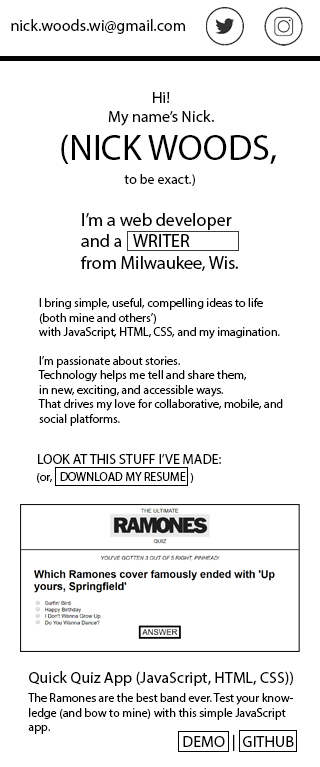
<style>
.page{position:relative;width:320px;height:767px;background:#ffffff}
.page>*{position:absolute;margin:0}
.t1{font:16px "MyriadPro-Regular";color:#000000}
.t2{font:36px "MyriadPro-Regular";color:#000000}
.t3{font:14px "MyriadPro-Regular";color:#000000}
.t4{font:18px "MyriadPro-Regular";color:#000000}
.t5{font:12px "MyriadPro-Regular";color:#000000}
</style>
<div class="page">
<p class="t1" style="left:11px;top:19px;width:174px;height:15px">nick.woods.wi@gmail.com</p>
<p class="t1" style="left:108px;top:92px;width:106px;height:34px;text-align:center">Hi!<br>My name’s Nick.</p>
<p class="t2" style="left:61px;top:134px;width:215px;height:30px">(NICK WOODS,</p>
<p class="t3" style="left:124px;top:174px;width:71px;height:12px">to be exact.)</p>
<p class="t4" style="left:80px;top:213px;width:158px;height:58px">I’m a web developer<br>and a   WRITER<br>from Milwaukee, Wis.</p>
<p class="t5" style="left:38px;top:298px;width:245px;height:128px">I bring simple, useful, compelling ideas to life<br>(both mine and others’)<br>with JavaScript, HTML, CSS, and my imagination.<br><br>I’m passionate about stories.<br>Technology helps me tell and share them,<br>in new, exciting, and accessible ways.<br>That drives my love for collaborative, mobile, and<br>social platforms.</p>
<p class="t3" style="left:38px;top:454px;width:183px;height:10px">LOOK AT THIS STUFF I’VE MADE:</p>
<p class="t5" style="left:37px;top:472px;width:157px;height:11px">(or,   DOWNLOAD MY RESUME  )</p>
<p class="t1" style="left:29px;top:671px;width:264px;height:15px">Quick Quiz App (JavaScript, HTML, CSS))</p>
<p class="t5" style="left:28px;top:693px;width:265px;height:41px">The Ramones are the best band ever. Test your know-<br>ledge (and bow to mine) with this simple JavaScript<br>app.</p>
<p class="t1" style="left:183px;top:734px;width:111px;height:17px">DEMO  |  GITHUB</p>
</div>
